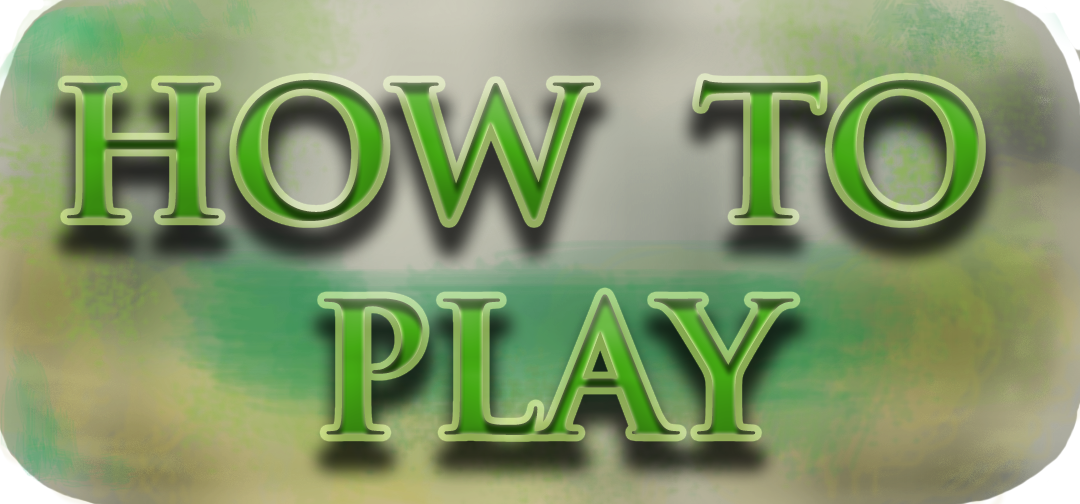
<style>
.page{position:relative;width:1080px;height:504px}
.page>*{position:absolute;margin:0}
.t1{font:180px "TrajanPro-Bold"}
</style>
<div class="page">
<p class="t1" style="left:64px;top:79px;width:915px;height:356px;text-align:center">HOW  TO <br>PLAY</p>
</div>
